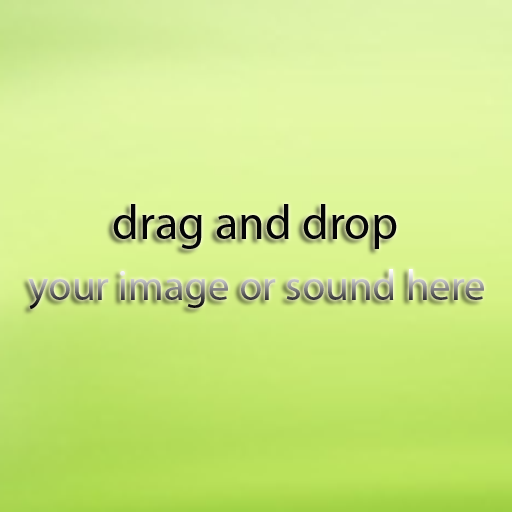
<style>
.page{position:relative;width:512px;height:512px}
.page>*{position:absolute;margin:0}
.t1{font:48px "MyriadPro-Regular";color:#040506}
.t2{font:42.7px "MyriadPro-Regular"}
</style>
<div class="page">
<p class="t1" style="left:113px;top:204px;width:284px;height:45px">drag and drop</p>
<p class="t2" style="left:28px;top:269px;width:456px;height:40px">your image or sound here</p>
</div>
